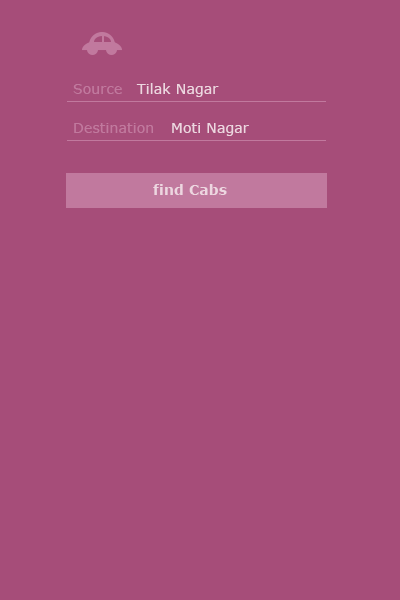
<style>
.page{position:relative;width:400px;height:600px;background:#a64d79}
.page>*{position:absolute;margin:0}
.t1{font:14px "Verdana";letter-spacing:0.01em;color:#c1799e}
.t2{font:14px "Verdana";letter-spacing:0.01em;color:#edd6e0}
.t3{font:14px "Verdana-Bold";letter-spacing:0.01em;color:#edd6e0}
</style>
<div class="page">
<p class="t1" style="left:73px;top:84px;width:49px;height:10px">Source</p>
<p class="t2" style="left:136px;top:83px;width:83px;height:14px">Tilak Nagar</p>
<p class="t1" style="left:74px;top:123px;width:79px;height:10px">Destination</p>
<p class="t2" style="left:172px;top:123px;width:77px;height:13px">Moti Nagar</p>
<p class="t3" style="left:153px;top:184px;width:74px;height:11px">find Cabs</p>
</div>
